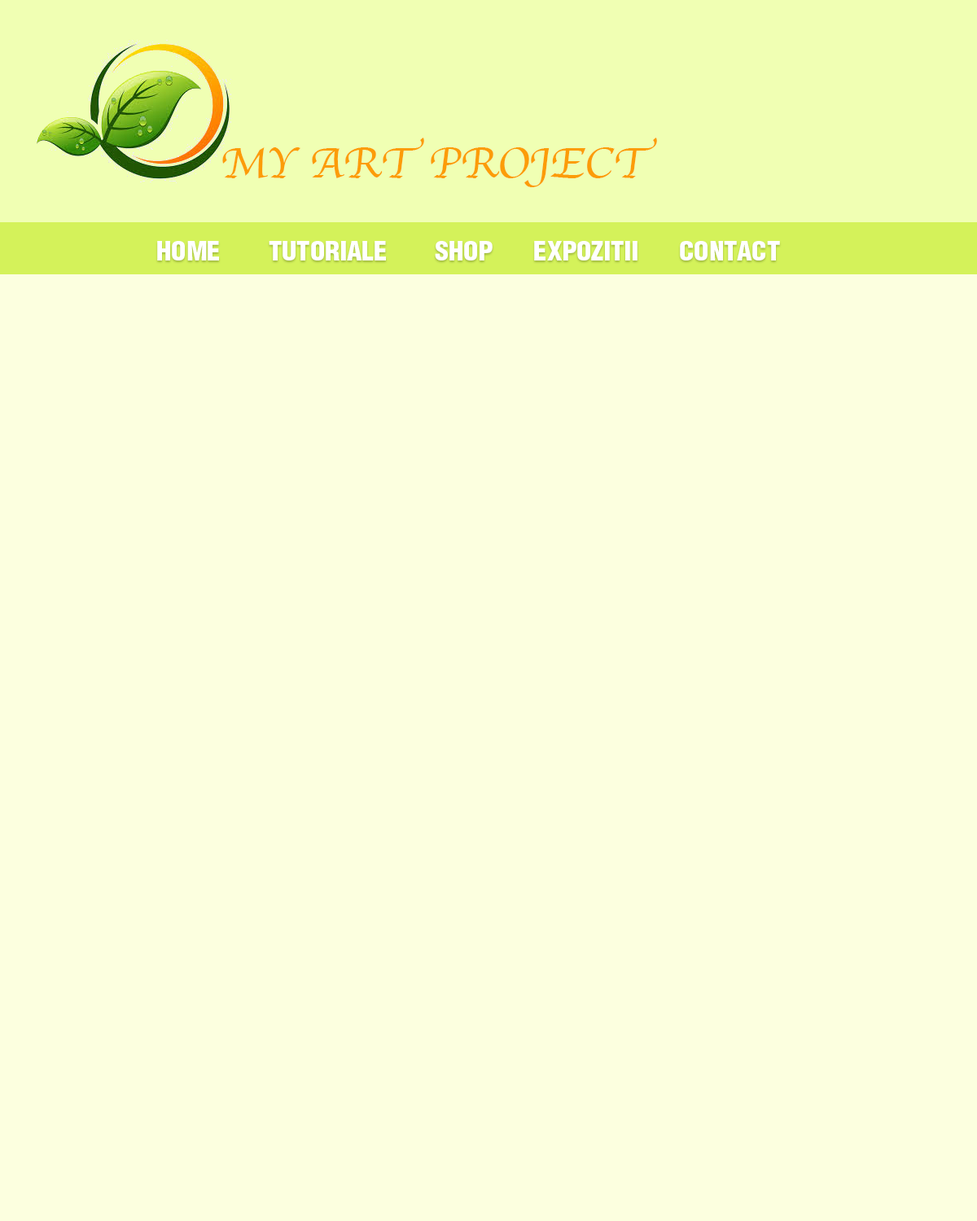
<style>
.page{position:relative;width:977px;height:1221px;background:#fcffdf}
.page>*{position:absolute;margin:0}
.t1{font:44.6px "Apple-Chancery";letter-spacing:-0.01em;color:#fc9c08;text-transform:uppercase;scale:1.06 1}
.t2{font:25.5px "AGLettericaDemiCondensedC";letter-spacing:-0.01em;color:#ffffff;text-transform:uppercase;scale:1.06 1}
</style>
<div class="page">
<p class="t1" style="left:222px;top:138px;width:435px;height:49px">my art project</p>
<p class="t2" style="left:157px;top:241px;width:62px;height:19px">Home</p>
<p class="t2" style="left:269px;top:241px;width:117px;height:19px">tutoriale</p>
<p class="t2" style="left:435px;top:241px;width:57px;height:19px">shop</p>
<p class="t2" style="left:534px;top:241px;width:103px;height:20px">expozitii</p>
<p class="t2" style="left:680px;top:241px;width:100px;height:19px">contact</p>
</div>
